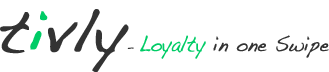
<style>
.page{position:relative;width:329px;height:72px;background:#ffffff}
.page>*{position:absolute;margin:0}
.t1{font:22px "Handwriting-Dakota";letter-spacing:0.01em;color:#333333;font-weight:bold;scale:0.8 1}
.t2{font:60px "Handwriting-Dakota";letter-spacing:0.01em;color:#333333;font-weight:bold}
.t3{font:60px "Handwriting-Dakota";letter-spacing:0.01em;color:#00cc66;font-weight:bold}
.t4{font:11.8px "Handwriting-Dakota";letter-spacing:0.01em;color:#333333;font-weight:bold}
.t5{font:22px "Handwriting-Dakota";letter-spacing:0.01em;color:#00cc66;font-weight:bold;scale:0.8 1}
</style>
<div class="page">
<p class="t1" style="left:0px;top:9px;width:329px;height:64px"><span class="t2">t</span><span class="t3">i</span><span class="t2">vly</span><span class="t4">- </span><span class="t5">Loyalty</span> in one Swipe</p>
</div>
